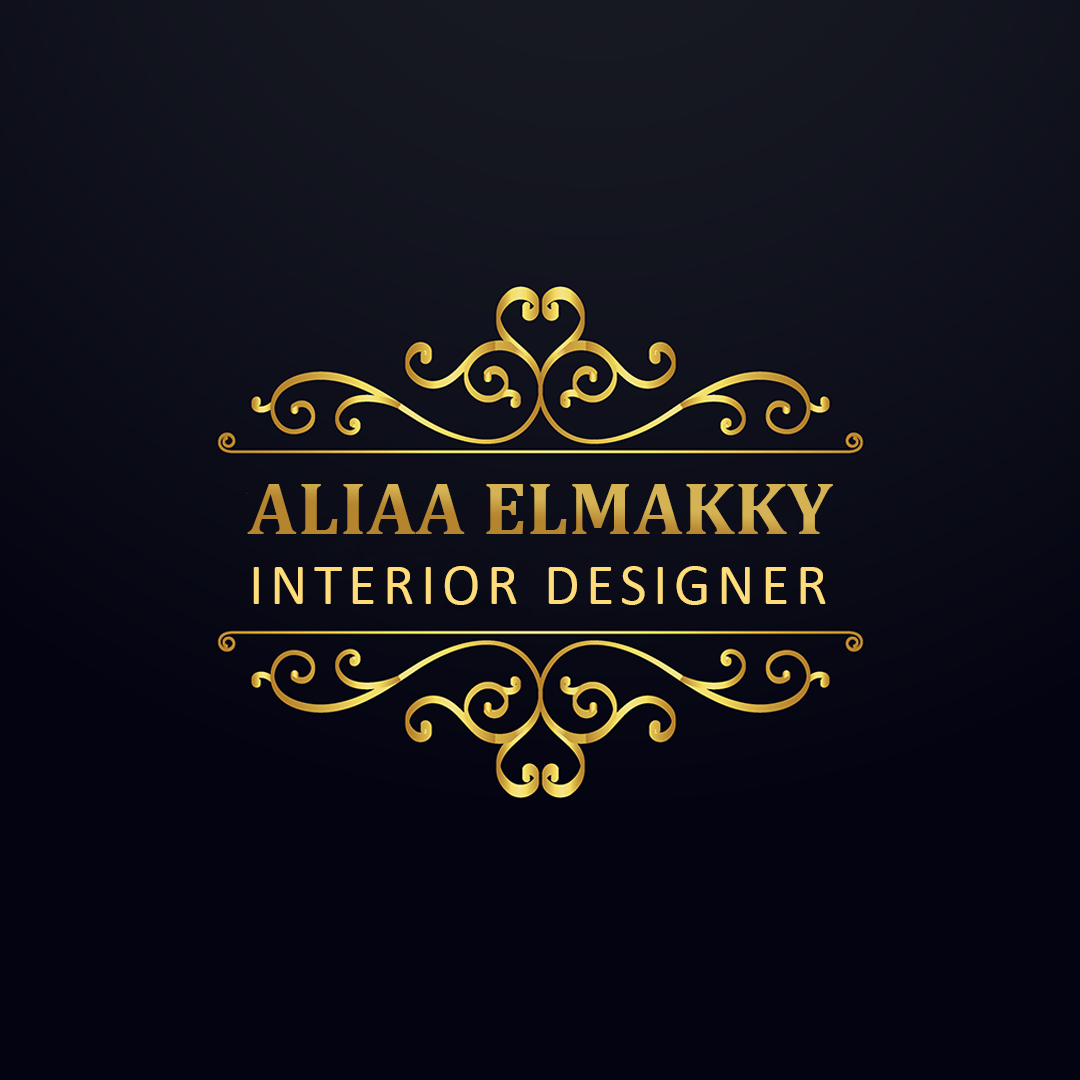
<style>
.page{position:relative;width:1080px;height:1080px;background:#040311}
.page>*{position:absolute;margin:0}
.t1{font:75px "Cambria-Bold";letter-spacing:0.01em;text-transform:uppercase}
.t2{font:58px "Calibri";letter-spacing:0.11em;color:#ffdc7b;text-transform:uppercase}
</style>
<div class="page">
<p class="t1" style="left:247px;top:484px;width:586px;height:50px">aliaa elmakky</p>
<p class="t2" style="left:253px;top:566px;width:573px;height:39px">interior designer</p>
</div>
